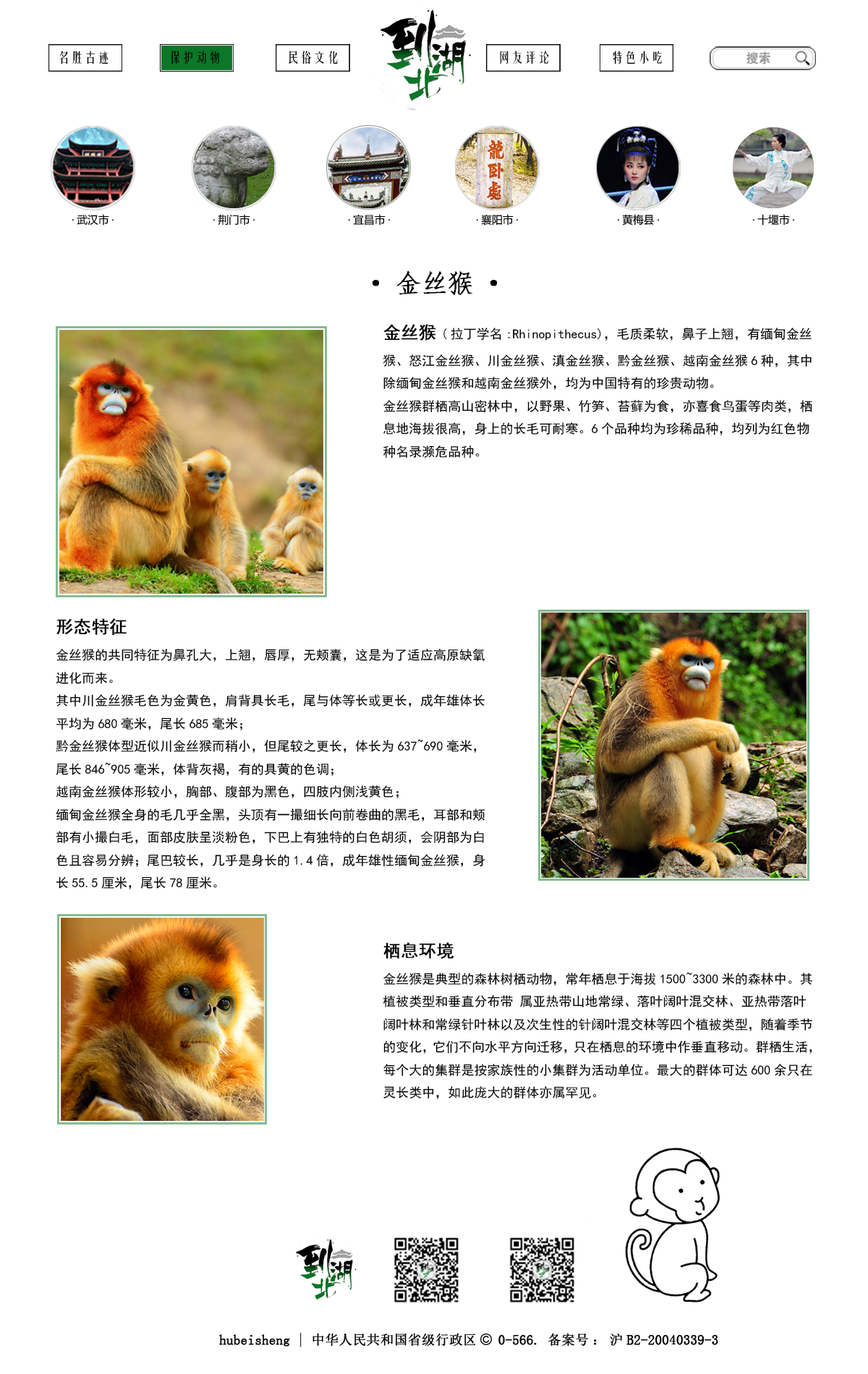
<style>
.page{position:relative;width:868px;height:1374px;background:#ffffff}
.page>*{position:absolute;margin:0}
.t1{font:13.3px "FZYTK--GBK1-0";color:#000000}
.t2{font:26px "·ÂËÎ";color:#000000;font-weight:bold}
.t3{font:13px "SimHei";color:#000000}
.t4{font:17.4px "SimHei";color:#000000;font-weight:bold}
</style>
<div class="page">
<p class="t1" style="left:59px;top:51px;width:49px;height:13px">名胜古迹</p>
<p class="t1" style="left:171px;top:51px;width:48px;height:13px">保护动物</p>
<p class="t1" style="left:289px;top:51px;width:49px;height:13px">民俗文化</p>
<p class="t1" style="left:500px;top:51px;width:49px;height:13px">网友评论</p>
<p class="t1" style="left:613px;top:51px;width:49px;height:13px">特色小吃</p>
<p class="t2" style="left:372px;top:270px;width:125px;height:25px">·金丝猴·</p>
<p class="t3" style="left:383px;top:324px;width:429px;height:134px"><span class="t4">金丝猴</span>(拉丁学名:Rhinopithecus)，毛质柔软，鼻子上翘，有缅甸金丝猴、怒江金丝猴、川金丝猴、滇金丝猴、黔金丝猴、越南金丝猴6种，其中除缅甸金丝猴和越南金丝猴外，均为中国特有的珍贵动物。<br>金丝猴群栖高山密林中，以野果、竹笋、苔藓为食，亦喜食鸟蛋等肉类，栖息地海拔很高，身上的长毛可耐寒。6个品种均为珍稀品种，均列为红色物种名录濒危品种。</p>
<p class="t3" style="left:56px;top:618px;width:429px;height:272px"><span class="t4">形态特征</span><br>金丝猴的共同特征为鼻孔大，上翘，唇厚，无颊囊，这是为了适应高原缺氧进化而来。<br>其中川金丝猴毛色为金黄色，肩背具长毛，尾与体等长或更长，成年雄体长平均为680毫米，尾长685毫米；<br>黔金丝猴体型近似川金丝猴而稍小，但尾较之更长，体长为637~690毫米，尾长846~905毫米，体背灰褐，有的具黄的色调；<br>越南金丝猴体形较小，胸部、腹部为黑色，四肢内侧浅黄色；<br>缅甸金丝猴全身的毛几乎全黑，头顶有一撮细长向前卷曲的黑毛，耳部和颊部有小撮白毛，面部皮肤呈淡粉色，下巴上有独特的白色胡须，会阴部为白色且容易分辨；尾巴较长，几乎是身长的1.4倍，成年雄性缅甸金丝猴，身长55.5厘米，尾长78厘米。</p>
<p class="t3" style="left:383px;top:942px;width:429px;height:157px"><span class="t4">栖息环境<br></span>金丝猴是典型的森林树栖动物，常年栖息于海拔1500~3300米的森林中。其植被类型和垂直分布带 属亚热带山地常绿、落叶阔叶混交林、亚热带落叶阔叶林和常绿针叶林以及次生性的针阔叶混交林等四个植被类型，随着季节的变化，它们不向水平方向迁移，只在栖息的环境中作垂直移动。群栖生活，每个大的集群是按家族性的小集群为活动单位。最大的群体可达600余只在灵长类中，如此庞大的群体亦属罕见。</p>
</div>
